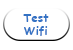
<style>
.page{position:relative;width:73px;height:50px;background:#ffffff}
.page>*{position:absolute;margin:0}
.t1{font:11.3px "ComicSansMS-Bold";color:#3372c4}
</style>
<div class="page">
<p class="t1" style="left:23px;top:14px;width:26px;height:22px">Test <br>    Wifi</p>
</div>
